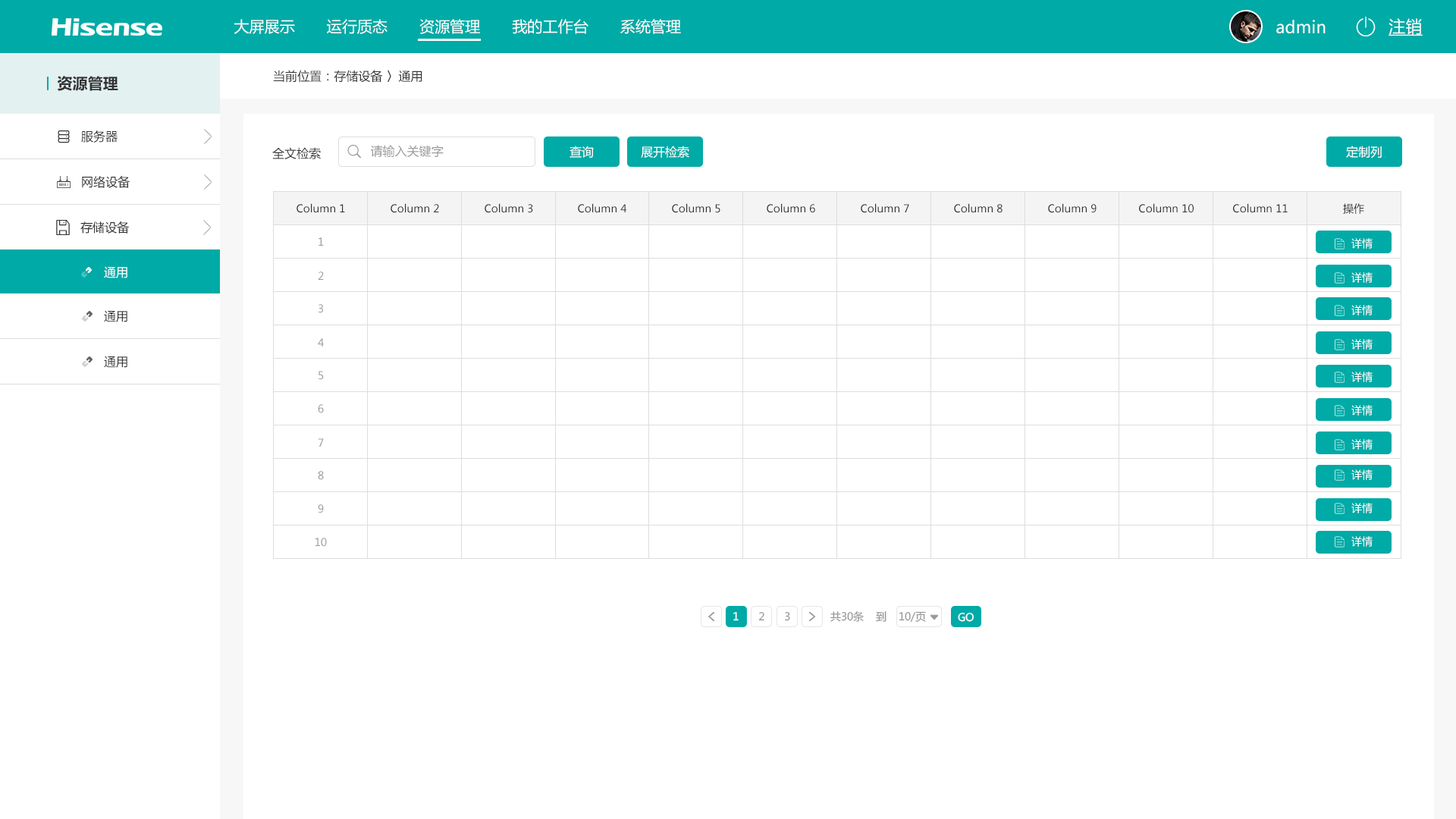
<style>
.page{position:relative;width:1456px;height:819px;background:#ffffff}
.page>*{position:absolute;margin:0}
.t1{font:15.2px "MicrosoftYaHei";letter-spacing:0.004em;color:#ffffff}
.t2{font:16.7px "MicrosoftYaHei";letter-spacing:0.004em;color:#ffffff}
.t3{font:16.7px "MicrosoftYaHei";letter-spacing:0.004em;color:#ffffff;text-decoration:underline}
.t4{font:15.2px "MicrosoftYaHei-Bold";letter-spacing:0.004em;color:#333333}
.t5{font:12.1px "MicrosoftYaHei";letter-spacing:0.004em;color:#333333}
.t6{font:12.1px "MicrosoftYaHei";letter-spacing:0.004em;color:#999999}
.t7{font:12.1px "MicrosoftYaHei";letter-spacing:0.004em;color:#ffffff}
.t8{font:10.6px "MicrosoftYaHei";letter-spacing:0.004em;color:#333333}
.t9{font:10.6px "MicrosoftYaHei";letter-spacing:0.004em;color:#999999}
.t10{font:10.6px "MicrosoftYaHei";letter-spacing:0.004em;color:#ffffff}
.t11{font:10.6px "MicrosoftYaHei";color:#ffffff}
.t12{font:10.6px "MicrosoftYaHei";color:#999999}
</style>
<div class="page">
<p class="t1" style="left:234px;top:19px;width:447px;height:15px">大屏展示       运行质态       资源管理       我的工作台       系统管理</p>
<p class="t2" style="left:1276px;top:20px;width:50px;height:13px">admin</p>
<p class="t3" style="left:1388px;top:18px;width:35px;height:18px">注销</p>
<p class="t4" style="left:57px;top:76px;width:61px;height:15px">资源管理</p>
<p class="t5" style="left:273px;top:70px;width:149px;height:13px">当前位置：存储设备 〉通用</p>
<p class="t5" style="left:81px;top:130px;width:37px;height:13px">服务器</p>
<p class="t5" style="left:272px;top:147px;width:49px;height:12px">全文检索</p>
<p class="t6" style="left:371px;top:145px;width:73px;height:13px">请输入关键字</p>
<p class="t7" style="left:570px;top:146px;width:24px;height:12px">查询</p>
<p class="t7" style="left:641px;top:146px;width:48px;height:12px">展开检索</p>
<p class="t7" style="left:1346px;top:146px;width:36px;height:12px">定制列</p>
<p class="t5" style="left:82px;top:175px;width:48px;height:13px">网络设备</p>
<p class="t8" style="left:297px;top:203px;width:48px;height:10px">Column 1</p>
<p class="t8" style="left:391px;top:203px;width:48px;height:10px">Column 2</p>
<p class="t8" style="left:485px;top:203px;width:48px;height:10px">Column 3</p>
<p class="t8" style="left:578px;top:203px;width:48px;height:10px">Column 4</p>
<p class="t8" style="left:672px;top:203px;width:48px;height:10px">Column 5</p>
<p class="t8" style="left:767px;top:203px;width:48px;height:10px">Column 6</p>
<p class="t8" style="left:861px;top:203px;width:48px;height:10px">Column 7</p>
<p class="t8" style="left:954px;top:203px;width:49px;height:10px">Column 8</p>
<p class="t8" style="left:1048px;top:203px;width:49px;height:10px">Column 9</p>
<p class="t8" style="left:1139px;top:203px;width:55px;height:10px">Column 10</p>
<p class="t8" style="left:1233px;top:203px;width:55px;height:10px">Column 11</p>
<p class="t8" style="left:1343px;top:203px;width:21px;height:11px">操作</p>
<p class="t5" style="left:80px;top:221px;width:50px;height:13px">存储设备</p>
<p class="t9" style="left:318px;top:237px;width:6px;height:9px">1</p>
<p class="t10" style="left:1351px;top:238px;width:22px;height:11px">详情</p>
<p class="t7" style="left:104px;top:266px;width:23px;height:12px">通用</p>
<p class="t9" style="left:318px;top:271px;width:6px;height:9px">2</p>
<p class="t10" style="left:1351px;top:272px;width:22px;height:11px">详情</p>
<p class="t9" style="left:318px;top:304px;width:5px;height:9px">3</p>
<p class="t10" style="left:1351px;top:305px;width:22px;height:10px">详情</p>
<p class="t5" style="left:104px;top:310px;width:23px;height:12px">通用</p>
<p class="t9" style="left:318px;top:338px;width:6px;height:9px">4</p>
<p class="t10" style="left:1351px;top:339px;width:22px;height:11px">详情</p>
<p class="t5" style="left:104px;top:356px;width:23px;height:12px">通用</p>
<p class="t9" style="left:318px;top:371px;width:6px;height:9px">5</p>
<p class="t10" style="left:1351px;top:372px;width:22px;height:10px">详情</p>
<p class="t9" style="left:318px;top:404px;width:6px;height:9px">6</p>
<p class="t10" style="left:1351px;top:405px;width:22px;height:11px">详情</p>
<p class="t9" style="left:318px;top:438px;width:6px;height:9px">7</p>
<p class="t10" style="left:1351px;top:439px;width:22px;height:11px">详情</p>
<p class="t9" style="left:318px;top:471px;width:6px;height:9px">8</p>
<p class="t10" style="left:1351px;top:469px;width:22px;height:11px">详情</p>
<p class="t9" style="left:318px;top:504px;width:6px;height:9px">9</p>
<p class="t10" style="left:1351px;top:503px;width:22px;height:10px">详情</p>
<p class="t9" style="left:315px;top:538px;width:12px;height:9px">10</p>
<p class="t10" style="left:1351px;top:536px;width:22px;height:11px">详情</p>
<p class="t11" style="left:733px;top:612px;width:6px;height:9px">1</p>
<p class="t12" style="left:758px;top:612px;width:6px;height:9px">2</p>
<p class="t12" style="left:785px;top:612px;width:5px;height:9px">3</p>
<p class="t12" style="left:830px;top:611px;width:96px;height:11px">共30条    到    10/页</p>
<p class="t11" style="left:958px;top:613px;width:16px;height:9px">GO</p>
</div>
